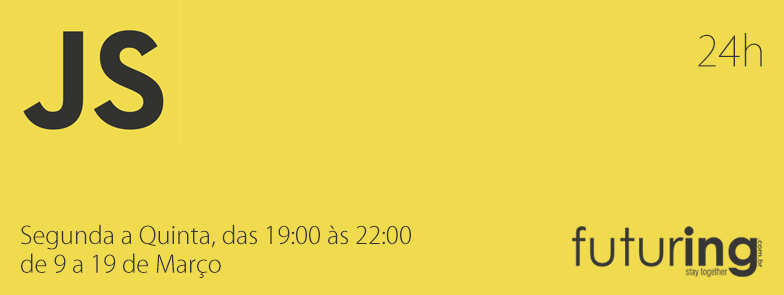
<style>
.page{position:relative;width:784px;height:295px;background:#f0db4f}
.page>*{position:absolute;margin:0}
.t1{font:42px "KozGoPro-ExtraLight";color:#363636}
.t2{font:24px "KozGoPro-Light";color:#363636}
</style>
<div class="page">
<p class="t1" style="left:698px;top:33px;width:64px;height:34px">24h</p>
<p class="t2" style="left:21px;top:224px;width:390px;height:54px">Segunda a Quinta, das 19:00 às 22:00<br>de 9 a 19 de Março</p>
</div>
